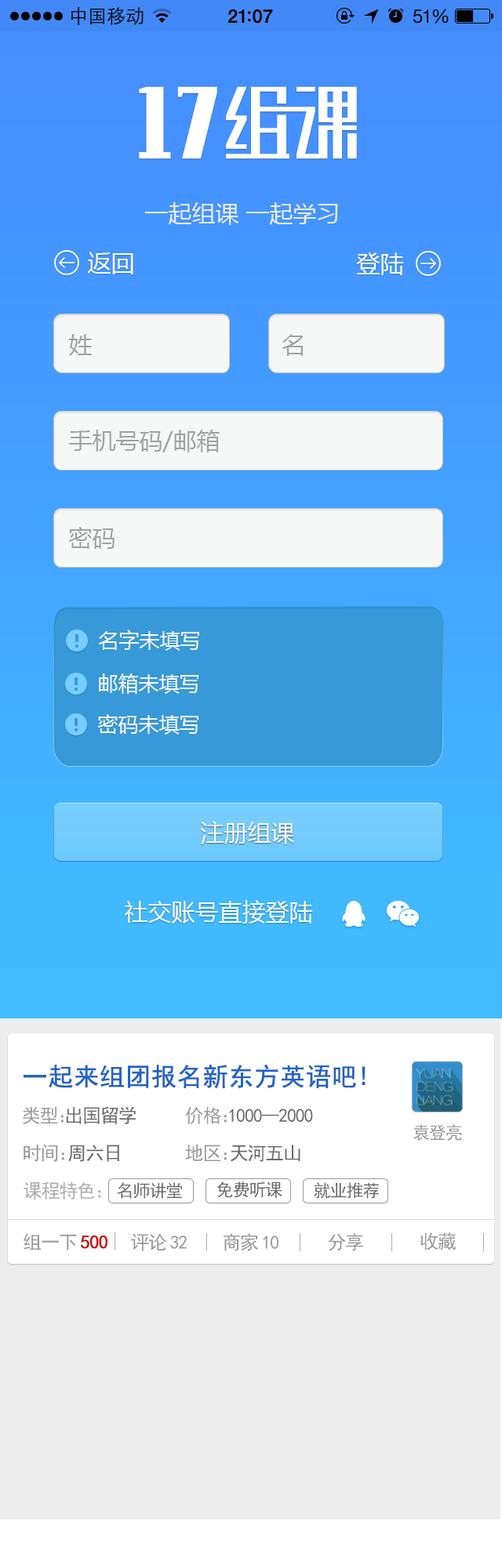
<style>
.page{position:relative;width:502px;height:1568px}
.page>*{position:absolute;margin:0}
.t1{font:23.5px "MicrosoftYaHei";color:#ededed}
.t2{font:23.5px "MicrosoftYaHei";color:#fefefe}
.t3{font:23.5px "MicrosoftYaHei";color:#a1a1a1}
.t4{font:20.4px "MicrosoftYaHei";color:#f6f8f8}
.t5{font:23.5px "MicrosoftYaHei"}
.t6{font:25.1px "SimHei";color:#2463c5;font-weight:bold}
.t7{font:18.8px "SimHei";letter-spacing:-0.05em;color:#696969}
.t8{font:18.8px "SimHei";letter-spacing:-0.05em;color:#999999}
.t9{font:18.8px "SimHei";letter-spacing:-0.62em;color:#999999}
.t10{font:17.2px "SimHei";letter-spacing:-0.05em;color:#999999}
.t11{font:18.8px "SimHei";letter-spacing:-0.5em;color:#999999}
.t12{font:18.8px "SimHei";letter-spacing:-0.52em;color:#999999}
.t13{font:18.8px "SimHei";letter-spacing:-0.05em;color:#acacac}
.t14{font:18.8px "SimHei";color:#acacac}
.t15{font:17.2px "SimHei";letter-spacing:-0.05em;color:#696969}
.t16{font:18.8px "SimHei";letter-spacing:-0.05em;color:#c61414;font-weight:bold}
.t17{font:18.8px "SimHei";letter-spacing:0.15em;color:#999999}
</style>
<div class="page">
<p class="t1" style="left:145px;top:202px;width:193px;height:23px">一起组课 一起学习</p>
<p class="t2" style="left:88px;top:252px;width:45px;height:22px">返回</p>
<p class="t2" style="left:356px;top:252px;width:48px;height:23px">登陆</p>
<p class="t3" style="left:69px;top:334px;width:23px;height:22px">姓</p>
<p class="t3" style="left:281px;top:334px;width:22px;height:22px">名</p>
<p class="t3" style="left:69px;top:430px;width:151px;height:22px">手机号码/邮箱</p>
<p class="t3" style="left:68px;top:527px;width:46px;height:22px">密码</p>
<p class="t4" style="left:98px;top:630px;width:101px;height:21px">名字未填写</p>
<p class="t4" style="left:99px;top:673px;width:99px;height:21px">邮箱未填写</p>
<p class="t4" style="left:97px;top:714px;width:101px;height:21px">密码未填写</p>
<p class="t2" style="left:201px;top:821px;width:93px;height:23px">注册组课</p>
<p class="t5" style="left:201px;top:821px;width:92px;height:23px">注册账户</p>
<p class="t2" style="left:125px;top:900px;width:188px;height:24px">社交账号直接登陆</p>
<p class="t6" style="left:24px;top:1064px;width:341px;height:24px">一起来组团报名新东方英语吧!</p>
<p class="t7" style="left:23px;top:1106px;width:113px;height:18px"><span class="t8">类型</span><span class="t9">：</span>出国留学</p>
<p class="t7" style="left:185px;top:1106px;width:128px;height:18px"><span class="t8">价格</span><span class="t9">：</span>1000--2000</p>
<p class="t10" style="left:412px;top:1124px;width:50px;height:17px">袁登亮</p>
<p class="t7" style="left:24px;top:1144px;width:95px;height:18px"><span class="t8">时间</span><span class="t11">：</span>周六日</p>
<p class="t7" style="left:185px;top:1144px;width:115px;height:18px"><span class="t8">地区</span><span class="t12">：</span>天河五山</p>
<p class="t13" style="left:24px;top:1181px;width:77px;height:19px">课程特色<span class="t14">：</span></p>
<p class="t15" style="left:216px;top:1181px;width:66px;height:17px">免费听课</p>
<p class="t15" style="left:117px;top:1182px;width:66px;height:17px">名师讲堂</p>
<p class="t15" style="left:314px;top:1182px;width:65px;height:17px">就业推荐</p>
<p class="t16" style="left:24px;top:1233px;width:83px;height:17px"><span class="t8">组一</span><span class="t17">下</span>500</p>
<p class="t8" style="left:131px;top:1233px;width:56px;height:18px">评<span class="t17">论</span>32</p>
<p class="t8" style="left:223px;top:1233px;width:55px;height:18px">商<span class="t17">家</span>10</p>
<p class="t8" style="left:328px;top:1233px;width:36px;height:18px">分享</p>
<p class="t8" style="left:420px;top:1232px;width:36px;height:18px">收藏</p>
</div>
